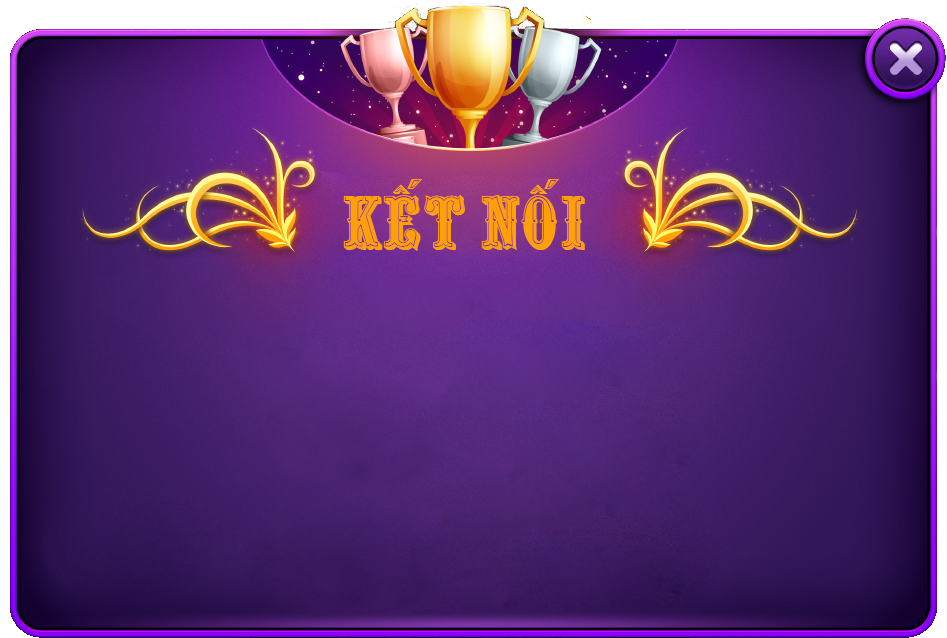
<style>
.page{position:relative;width:947px;height:638px}
.page>*{position:absolute;margin:0}
.t1{font:72px "VNI-Silver";color:#ffa008}
</style>
<div class="page">
<p class="t1" style="left:343px;top:179px;width:242px;height:72px">Keát noái</p>
</div>
